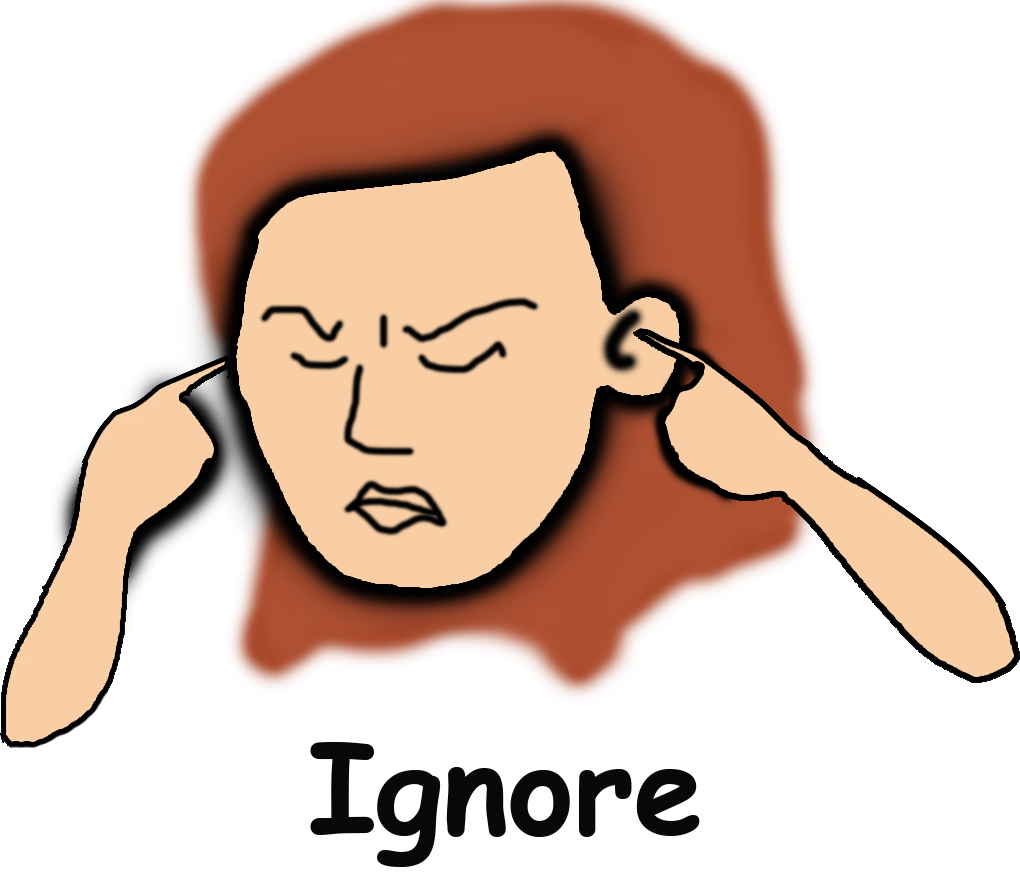
<style>
.page{position:relative;width:1020px;height:895px;background:#ffffff}
.page>*{position:absolute;margin:0}
.t1{font:125px "ComicSansMS-Bold";color:#080807}
</style>
<div class="page">
<p class="t1" style="left:310px;top:742px;width:390px;height:125px">Ignore</p>
</div>
